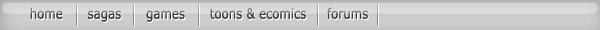
<style>
.page{position:relative;width:600px;height:30px}
.page>*{position:absolute;margin:0}
.t1{font:14px "Verdana";scale:0.84 1}
</style>
<div class="page">
<p class="t1" style="left:30px;top:7px;width:338px;height:15px">home      sagas      games      toons &amp; ecomics     forums</p>
</div>
